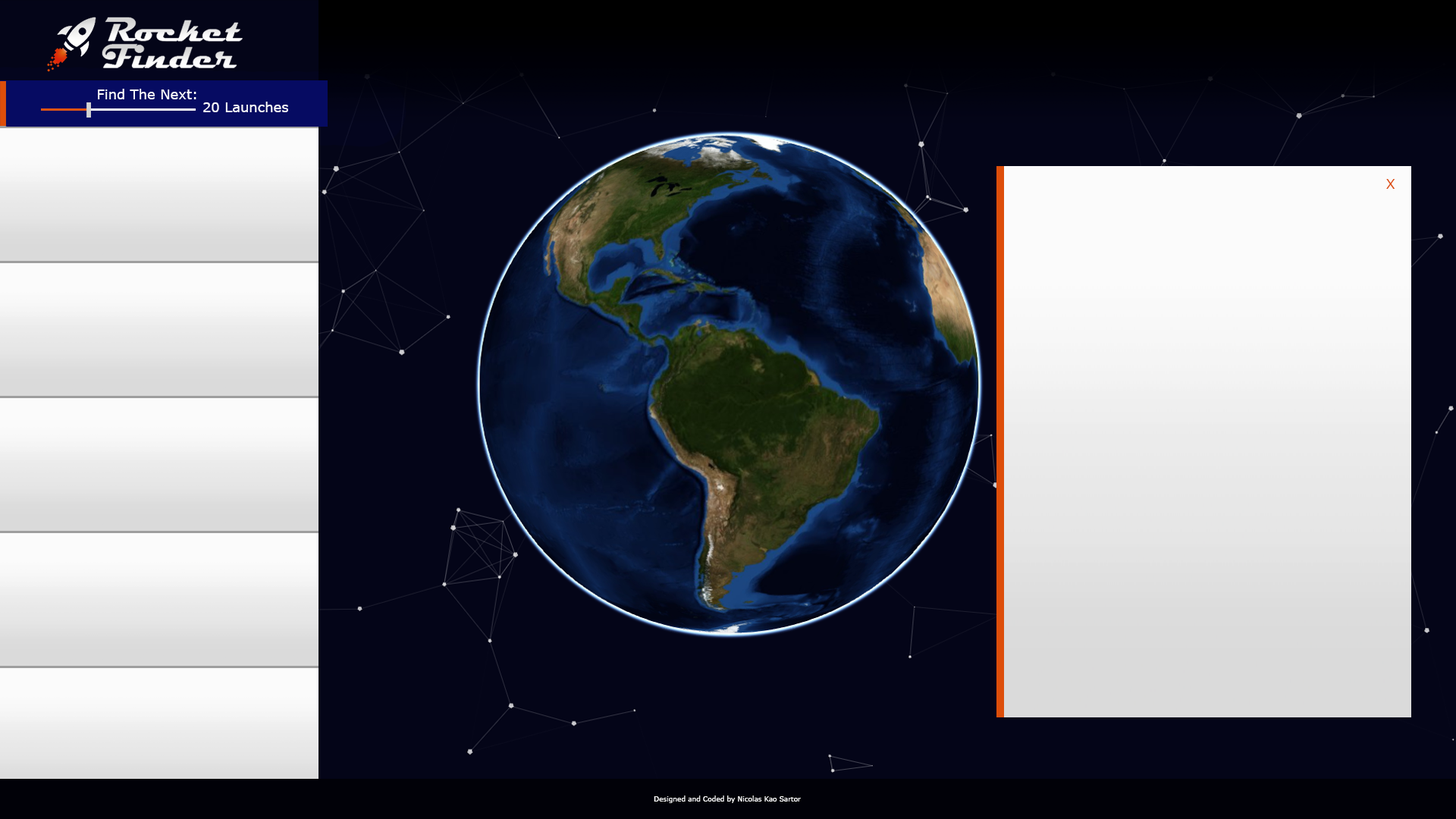
<style>
.page{position:relative;width:1456px;height:819px;background:#040518}
.page>*{position:absolute;margin:0}
.t1{font:13.6px "MSReferenceSansSerif";color:#fbfbfb}
.t2{font:13.6px "MSReferenceSansSerif";color:#dd4e0a}
.t3{font:6.8px "MSReferenceSansSerif";color:#fdfdfd}
</style>
<div class="page">
<p class="t1" style="left:98px;top:89px;width:98px;height:10px">Find The Next:</p>
<p class="t1" style="left:203px;top:102px;width:85px;height:10px">20 Launches</p>
<p class="t2" style="left:1386px;top:179px;width:9px;height:10px">X</p>
<p class="t3" style="left:654px;top:795px;width:147px;height:8px">Designed and Coded by Nicolas Kao Sartor</p>
</div>
